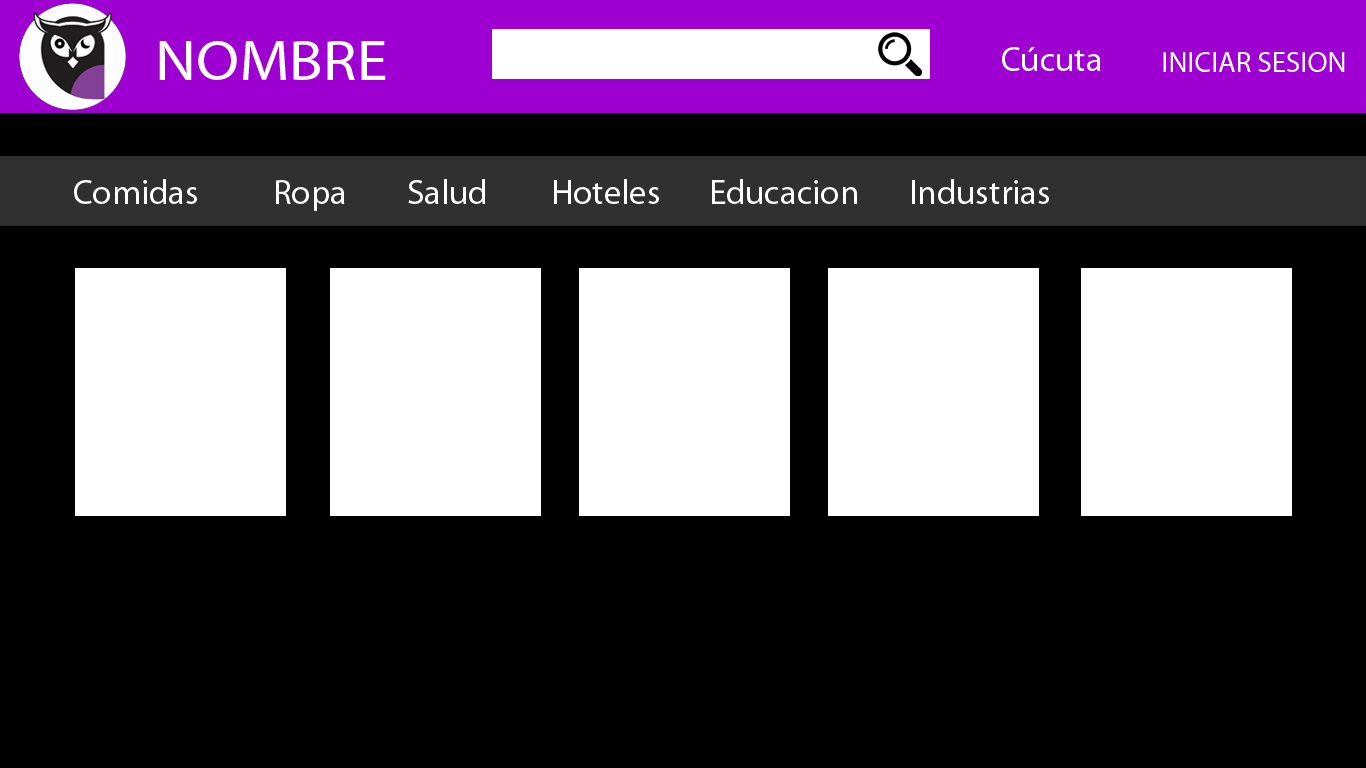
<style>
.page{position:relative;width:1366px;height:768px;background:#000000}
.page>*{position:absolute;margin:0}
.t1{font:56.9px "MyriadPro-Regular";color:#ffffff;scale:1.1 1}
.t2{font:34.8px "MyriadPro-Regular";color:#ffffff}
.t3{font:29px "MyriadPro-Regular";color:#ffffff}
</style>
<div class="page">
<p class="t1" style="left:159px;top:41px;width:227px;height:39px">NOMBRE</p>
<p class="t2" style="left:1002px;top:47px;width:99px;height:24px">Cúcuta</p>
<p class="t3" style="left:1163px;top:52px;width:182px;height:20px">INICIAR SESION</p>
<p class="t2" style="left:74px;top:179px;width:123px;height:25px">Comidas</p>
<p class="t2" style="left:276px;top:180px;width:69px;height:31px">Ropa</p>
<p class="t2" style="left:408px;top:179px;width:77px;height:25px">Salud</p>
<p class="t2" style="left:554px;top:179px;width:105px;height:25px">Hoteles</p>
<p class="t2" style="left:712px;top:179px;width:145px;height:25px">Educacion</p>
<p class="t2" style="left:912px;top:179px;width:137px;height:25px">Industrias</p>
</div>
